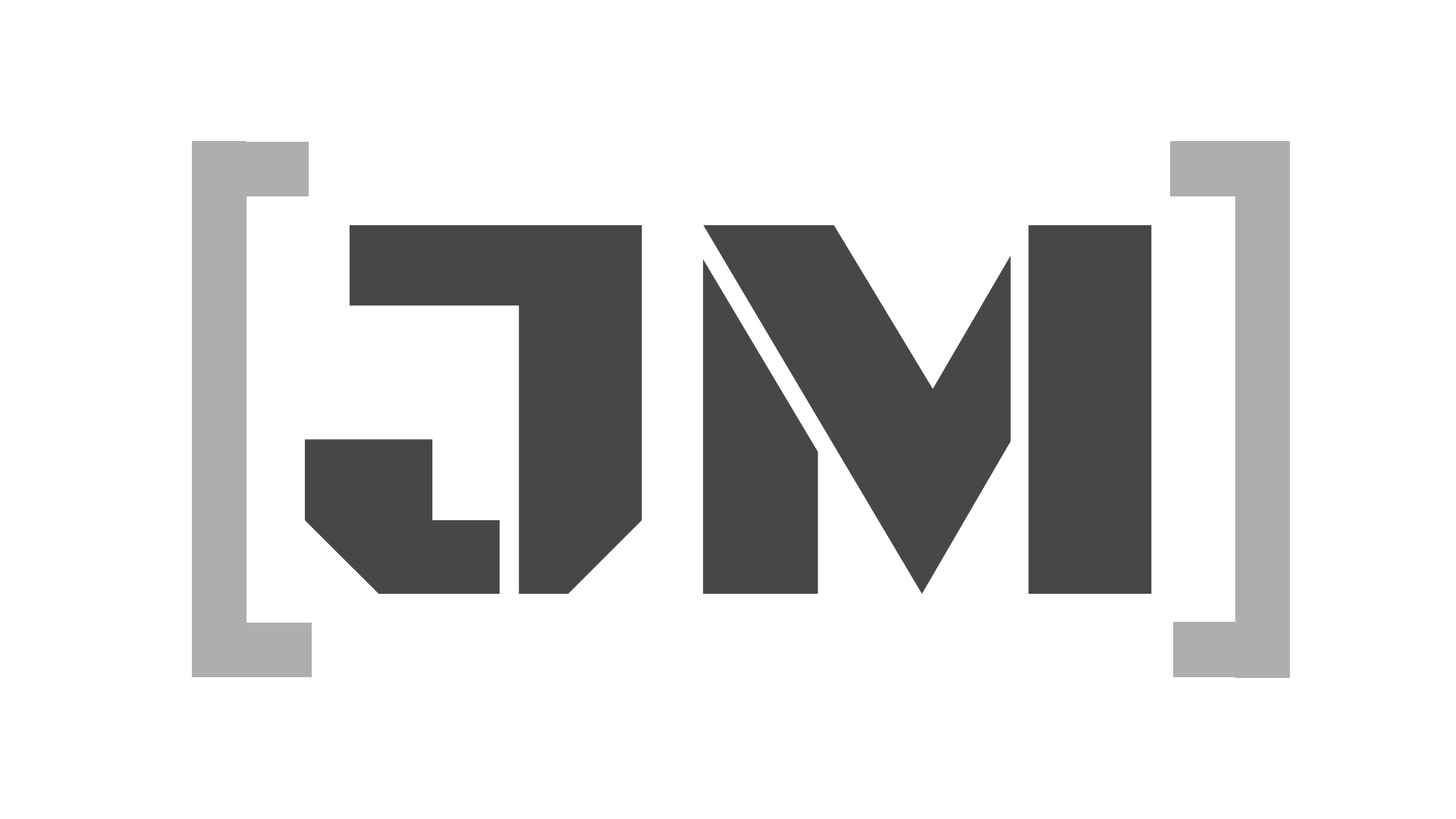
<style>
.page{position:relative;width:1456px;height:819px;background:#ffffff}
.page>*{position:absolute;margin:0}
.t1{font:568.7px "BlackOpsOne-Regular";color:#474747}
</style>
<div class="page">
<p class="t1" style="left:305px;top:225px;width:847px;height:369px">JM</p>
<p class="t1" style="left:305px;top:225px;width:847px;height:369px">JM</p>
<p class="t1" style="left:305px;top:225px;width:847px;height:369px">JM</p>
</div>
